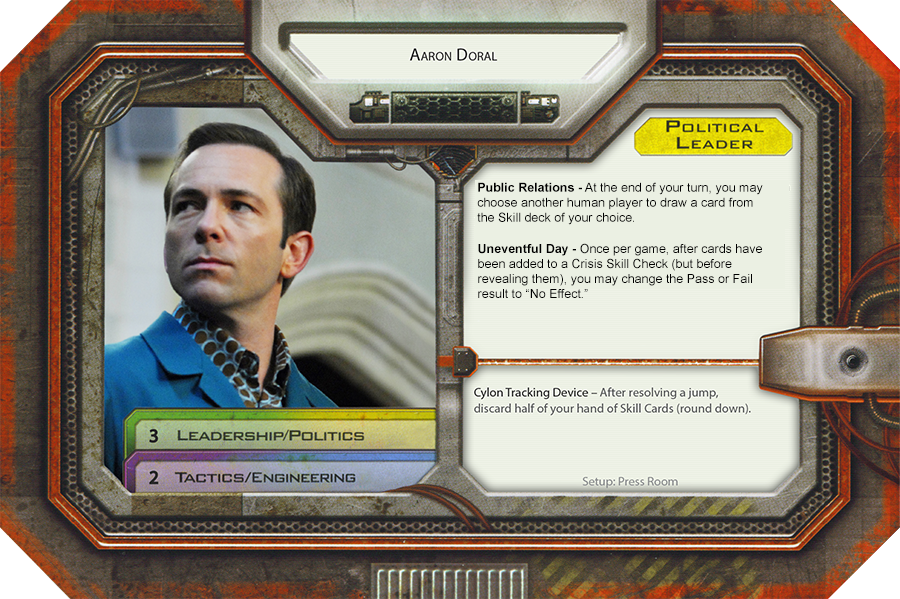
<style>
.page{position:relative;width:900px;height:599px}
.page>*{position:absolute;margin:0}
.t1{font:12.5px "ArialMT";color:#000000}
.t2{font:12.5px "Arial-BoldMT";color:#000000}
</style>
<div class="page">
<p class="t1" style="left:477px;top:182px;width:286px;height:43px"><span class="t2">Public Relations -</span> At the end of your turn, you may <br>choose another human player to draw a card from <br>the Skill deck of your choice.</p>
<p class="t1" style="left:478px;top:243px;width:284px;height:55px"><span class="t2">Uneventful Day -</span> Once per game, after cards have<br>been added to a Crisis Skill Check (but before <br>revealing them), you may change the Pass or Fail <br>result to “No Effect.”</p>
</div>
